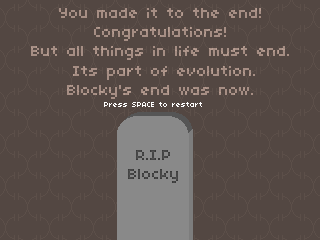
<style>
.page{position:relative;width:320px;height:240px;background:#534742}
.page>*{position:absolute;margin:0}
.t1{font:16px "04b03";color:#a68e84}
.t2{font:8px "04b03";color:#ffffff}
.t3{font:16px "04b03";color:#555555}
</style>
<div class="page">
<p class="t1" style="left:31px;top:8px;width:258px;height:91px;text-align:center">You made it to the end!<br>Congratulations!<br>But all things in life must end.<br> Its part of evolution.<br>Blocky's end was now.</p>
<p class="t2" style="left:104px;top:102px;width:98px;height:5px">Press SPACE to restart</p>
<p class="t3" style="left:128px;top:150px;width:50px;height:33px;text-align:center">R.I.P<br>Blocky</p>
</div>
